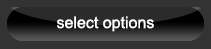
<style>
.page{position:relative;width:211px;height:49px;background:#333333}
.page>*{position:absolute;margin:0}
.t1{font:16px "ArialMT";color:#ffffff}
</style>
<div class="page">
<p class="t1" style="left:57px;top:16px;width:97px;height:16px">select options</p>
</div>
